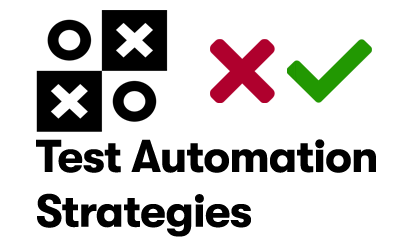
<style>
.page{position:relative;width:400px;height:250px;background:#ffffff}
.page>*{position:absolute;margin:0}
.t1{font:45.6px "GTWalsheimPro-Bold";letter-spacing:-0.02em;color:#000000}
</style>
<div class="page">
<p class="t1" style="left:36px;top:139px;width:340px;height:98px">Test Automation Strategies</p>
</div>
